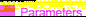
<style>
.page{position:relative;width:86px;height:17px}
.page>*{position:absolute;margin:0}
.t1{font:12px "ArialMT"}
</style>
<div class="page">
<p class="t1" style="left:21px;top:4px;width:61px;height:9px">Parameters</p>
</div>
